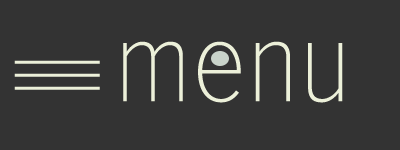
<style>
.page{position:relative;width:400px;height:150px;background:#333333}
.page>*{position:absolute;margin:0}
.t1{font:120px "ProximaNovaCond-Thin";color:#ecf0d9}
.t2{font:100px "ProximaNovaCond-Thin";color:#ecf0d9}
</style>
<div class="page">
<p class="t1" style="left:123px;top:41px;width:220px;height:62px">menu</p>
<p class="t2" style="left:14px;top:60px;width:86px;height:4px">__</p>
<p class="t2" style="left:14px;top:73px;width:86px;height:4px">__</p>
<p class="t2" style="left:14px;top:86px;width:86px;height:4px">__</p>
</div>
